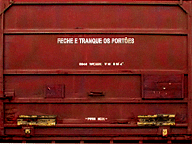
<style>
.page{position:relative;width:192px;height:144px}
.page>*{position:absolute;margin:0}
.t1{font:6.6px "Arial-BoldMT";color:#f9fbf7;font-weight:bold;scale:0.68 1}
</style>
<div class="page">
<p class="t1" style="left:57px;top:37px;width:78px;height:7px">FECHE E TRANQUE OS PORTÕES</p>
</div>
